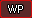
<style>
.page{position:relative;width:32px;height:18px;background:#5c2929}
.page>*{position:absolute;margin:0}
.t1{font:10.7px "Tahoma";color:#ffffff}
</style>
<div class="page">
<p class="t1" style="left:8px;top:5px;width:15px;height:8px">WP</p>
</div>
